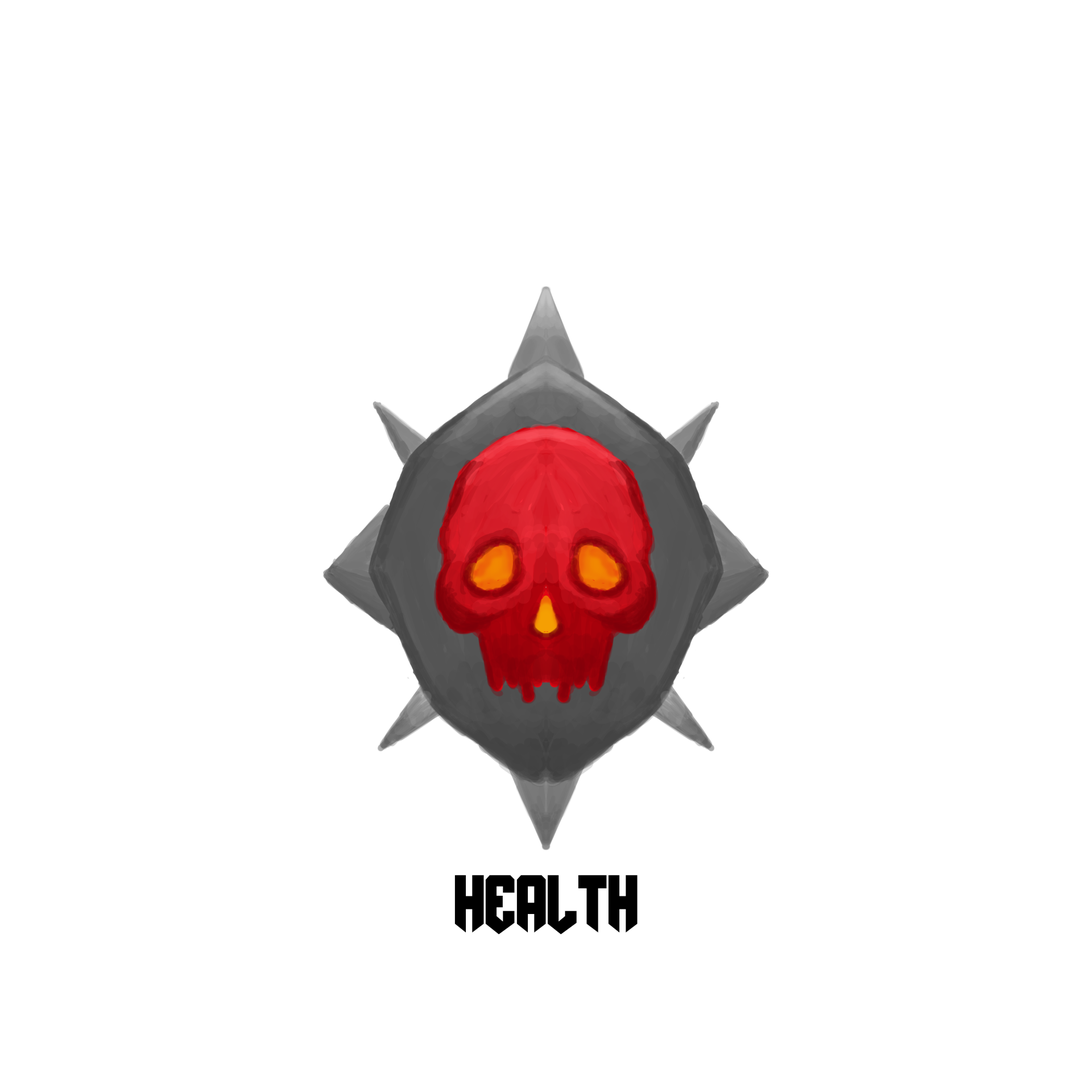
<style>
.page{position:relative;width:1092px;height:1092px;background:#ffffff}
.page>*{position:absolute;margin:0}
.t1{font:94.8px "AmazDooMLeft";color:#000000}
.t2{font:94.8px "AmazDooMRight";color:#000000}
</style>
<div class="page">
<p class="t1" style="left:454px;top:875px;width:184px;height:59px">hea<span class="t2">lth</span></p>
</div>
